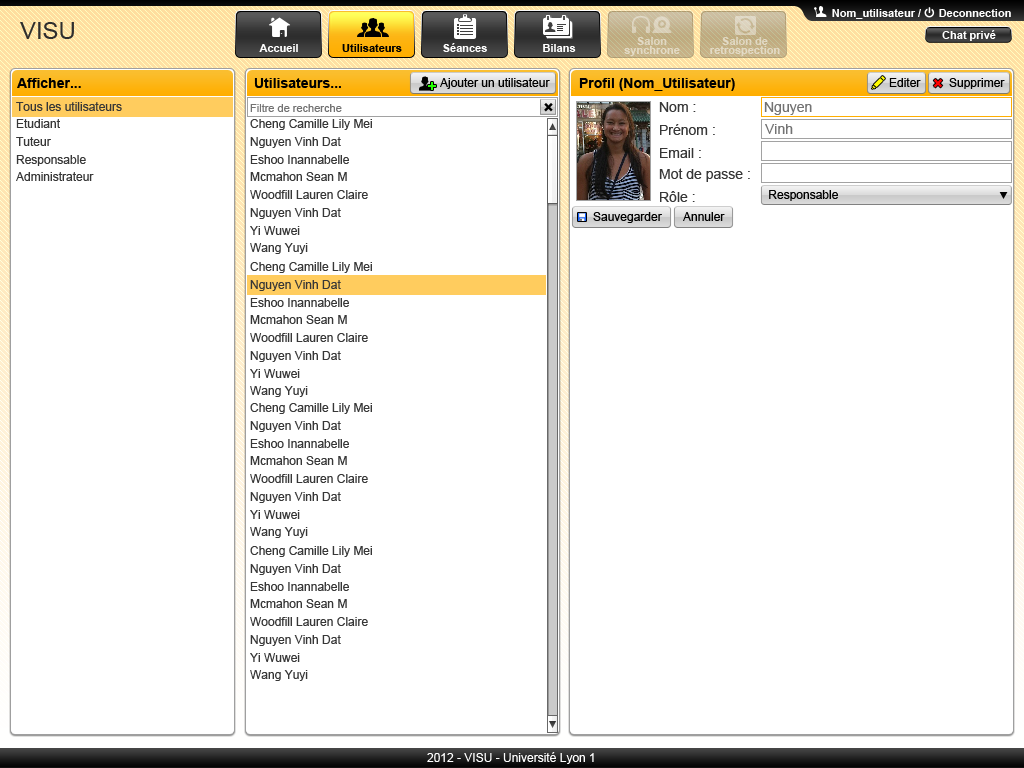
<style>
.page{position:relative;width:1024px;height:768px;background:#ffffff}
.page>*{position:absolute;margin:0}
.t1{font:11px "Arial-BoldMT";color:#ffffff}
.t2{font:24px "ArialMT";color:#2e2e2e}
.t3{font:11px/9px "Arial-BoldMT";color:#e3d8c2}
.t4{font:11px/9px "Arial-BoldMT";color:#e2d7c2}
.t5{font:11px "Arial-BoldMT";color:#000000}
.t6{font:14px "Arial-BoldMT";color:#000000}
.t7{font:12px "ArialMT";color:#000000}
.t8{font:14px "Arial-BoldMT";color:#24ff00}
.t9{font:19.3px "Arial-BoldMT";color:#ff0000}
.t10{font:12px "ArialMT";color:#373737}
.t11{font:14px "ArialMT";color:#373737}
.t12{font:14px "ArialMT";color:#737373}
.t13{font:11px "ArialMT";color:#737373}
.t14{font:19.3px "Arial-BoldMT";color:#000000}
.t15{font:12px "ArialMT";color:#fefefe}
</style>
<div class="page">
<p class="t1" style="left:832px;top:9px;width:89px;height:10px">Nom_utilisateur /</p>
<p class="t1" style="left:939px;top:9px;width:72px;height:8px">Deconnection</p>
<p class="t2" style="left:20px;top:22px;width:54px;height:17px">VISU</p>
<p class="t1" style="left:942px;top:30px;width:54px;height:11px">Chat privé</p>
<p class="t3" style="left:624px;top:37px;width:56px;height:19px;text-align:center">Salon<br>synchrone</p>
<p class="t4" style="left:710px;top:37px;width:70px;height:19px;text-align:center">Salon de<br>retrospection</p>
<p class="t1" style="left:259px;top:44px;width:39px;height:8px">Accueil</p>
<p class="t5" style="left:342px;top:44px;width:60px;height:8px">Utilisateurs</p>
<p class="t1" style="left:443px;top:43px;width:44px;height:9px">Séances</p>
<p class="t1" style="left:543px;top:44px;width:33px;height:8px">Bilans</p>
<p class="t6" style="left:17px;top:78px;width:64px;height:10px">Afficher...</p>
<p class="t6" style="left:254px;top:78px;width:87px;height:10px">Utilisateurs...</p>
<p class="t7" style="left:440px;top:78px;width:110px;height:11px">Ajouter un utilisateur</p>
<p class="t6" style="left:579px;top:78px;width:156px;height:13px">Profil (Nom_Utilisateur)</p>
<p class="t7" style="left:889px;top:78px;width:32px;height:9px">Editer</p>
<p class="t7" style="left:949px;top:78px;width:56px;height:11px">Supprimer</p>
<p class="t8" style="left:428px;top:82px;width:8px;height:8px">+</p>
<p class="t9" style="left:933px;top:79px;width:10px;height:9px;rotate:-45deg">+</p>
<p class="t10" style="left:16px;top:102px;width:106px;height:9px">Tous les utilisateurs</p>
<p class="t11" style="left:659px;top:102px;width:37px;height:10px">Nom :</p>
<p class="t12" style="left:764px;top:102px;width:48px;height:13px">Nguyen</p>
<p class="t13" style="left:250px;top:104px;width:92px;height:8px">Filtre de recherche</p>
<p class="t14" style="left:544px;top:103px;width:9px;height:9px;rotate:-45deg">+</p>
<p class="t10" style="left:16px;top:119px;width:44px;height:9px">Etudiant</p>
<p class="t10" style="left:250px;top:119px;width:122px;height:11px">Cheng Camille Lily Mei</p>
<p class="t11" style="left:660px;top:124px;width:55px;height:11px">Prénom :</p>
<p class="t12" style="left:765px;top:124px;width:28px;height:10px">Vinh</p>
<p class="t10" style="left:16px;top:137px;width:35px;height:9px">Tuteur</p>
<p class="t10" style="left:250px;top:137px;width:91px;height:11px">Nguyen Vinh Dat</p>
<p class="t11" style="left:660px;top:148px;width:41px;height:10px">Email :</p>
<p class="t10" style="left:16px;top:155px;width:70px;height:11px">Responsable</p>
<p class="t10" style="left:250px;top:155px;width:99px;height:9px">Eshoo Inannabelle</p>
<p class="t10" style="left:16px;top:172px;width:78px;height:9px">Administrateur</p>
<p class="t10" style="left:250px;top:172px;width:97px;height:9px">Mcmahon Sean M</p>
<p class="t11" style="left:659px;top:168px;width:91px;height:14px">Mot de passe :</p>
<p class="t10" style="left:250px;top:190px;width:118px;height:9px">Woodfill Lauren Claire</p>
<p class="t11" style="left:660px;top:191px;width:35px;height:11px">Rôle :</p>
<p class="t7" style="left:769px;top:190px;width:69px;height:11px">Responsable</p>
<p class="t10" style="left:250px;top:208px;width:91px;height:11px">Nguyen Vinh Dat</p>
<p class="t7" style="left:593px;top:212px;width:69px;height:11px">Sauvegarder</p>
<p class="t7" style="left:683px;top:212px;width:42px;height:9px">Annuler</p>
<p class="t10" style="left:250px;top:226px;width:50px;height:9px">Yi Wuwei</p>
<p class="t10" style="left:250px;top:243px;width:58px;height:11px">Wang Yuyi</p>
<p class="t10" style="left:250px;top:262px;width:122px;height:11px">Cheng Camille Lily Mei</p>
<p class="t10" style="left:250px;top:280px;width:91px;height:11px">Nguyen Vinh Dat</p>
<p class="t10" style="left:250px;top:298px;width:99px;height:9px">Eshoo Inannabelle</p>
<p class="t10" style="left:250px;top:315px;width:97px;height:9px">Mcmahon Sean M</p>
<p class="t10" style="left:250px;top:333px;width:118px;height:9px">Woodfill Lauren Claire</p>
<p class="t10" style="left:250px;top:351px;width:91px;height:11px">Nguyen Vinh Dat</p>
<p class="t10" style="left:250px;top:369px;width:50px;height:9px">Yi Wuwei</p>
<p class="t10" style="left:250px;top:386px;width:58px;height:11px">Wang Yuyi</p>
<p class="t10" style="left:250px;top:403px;width:122px;height:11px">Cheng Camille Lily Mei</p>
<p class="t10" style="left:250px;top:421px;width:91px;height:11px">Nguyen Vinh Dat</p>
<p class="t10" style="left:250px;top:439px;width:99px;height:9px">Eshoo Inannabelle</p>
<p class="t10" style="left:250px;top:456px;width:97px;height:9px">Mcmahon Sean M</p>
<p class="t10" style="left:250px;top:474px;width:118px;height:9px">Woodfill Lauren Claire</p>
<p class="t10" style="left:250px;top:492px;width:91px;height:11px">Nguyen Vinh Dat</p>
<p class="t10" style="left:250px;top:510px;width:50px;height:9px">Yi Wuwei</p>
<p class="t10" style="left:250px;top:527px;width:58px;height:11px">Wang Yuyi</p>
<p class="t10" style="left:250px;top:546px;width:122px;height:11px">Cheng Camille Lily Mei</p>
<p class="t10" style="left:250px;top:564px;width:91px;height:11px">Nguyen Vinh Dat</p>
<p class="t10" style="left:250px;top:582px;width:99px;height:9px">Eshoo Inannabelle</p>
<p class="t10" style="left:250px;top:599px;width:97px;height:9px">Mcmahon Sean M</p>
<p class="t10" style="left:250px;top:617px;width:118px;height:9px">Woodfill Lauren Claire</p>
<p class="t10" style="left:250px;top:635px;width:91px;height:11px">Nguyen Vinh Dat</p>
<p class="t10" style="left:250px;top:653px;width:50px;height:9px">Yi Wuwei</p>
<p class="t10" style="left:250px;top:670px;width:58px;height:11px">Wang Yuyi</p>
<p class="t15" style="left:427px;top:752px;width:167px;height:12px">2012 - VISU - Université Lyon 1</p>
</div>
